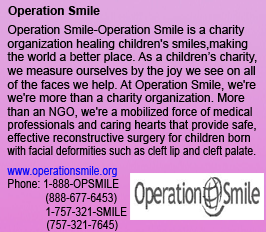
<style>
.page{position:relative;width:266px;height:232px}
.page>*{position:absolute;margin:0}
.t1{font:12px "Arial-BoldMT";color:#000000}
.t2{font:12px "ArialMT";color:#000000}
.t3{font:12px "ArialMT";color:#000000;scale:0.95 1}
.t4{font:12px "ArialMT";color:#000000;scale:0.86 1}
.t5{font:12px "ArialMT";color:#0b0bf9;scale:0.86 1}
</style>
<div class="page">
<p class="t1" style="left:8px;top:6px;width:92px;height:11px">Operation Smile</p>
<p class="t2" style="left:8px;top:25px;width:237px;height:11px">Operation Smile-Operation Smile is a charity</p>
<p class="t2" style="left:7px;top:39px;width:241px;height:11px">organization healing children's smiles,making</p>
<p class="t2" style="left:7px;top:52px;width:250px;height:11px">the world a better place. As a children’s charity,</p>
<p class="t2" style="left:7px;top:66px;width:248px;height:11px">we measure ourselves by the joy we see on all</p>
<p class="t2" style="left:7px;top:80px;width:249px;height:11px">of the faces we help. At Operation Smile, we're</p>
<p class="t2" style="left:7px;top:93px;width:238px;height:11px">we're more than a charity organization. More</p>
<p class="t3" style="left:7px;top:107px;width:245px;height:11px">than an NGO, we're a mobilized force of medical</p>
<p class="t3" style="left:8px;top:120px;width:248px;height:11px">professionals and caring hearts that provide safe,</p>
<p class="t3" style="left:7px;top:133px;width:243px;height:11px">effective reconstructive surgery for children born</p>
<p class="t4" style="left:7px;top:146px;width:249px;height:11px">with facial deformities such as cleft lip and cleft palate.</p>
<p class="t5" style="left:7px;top:166px;width:110px;height:11px">www.operationsmile.org</p>
<p class="t4" style="left:8px;top:179px;width:111px;height:9px">Phone: 1-888-OPSMILE</p>
<p class="t4" style="left:46px;top:193px;width:71px;height:11px">(888-677-6453)</p>
<p class="t4" style="left:46px;top:207px;width:81px;height:9px">1-757-321-SMILE</p>
<p class="t4" style="left:47px;top:220px;width:71px;height:11px">(757-321-7645)</p>
</div>
